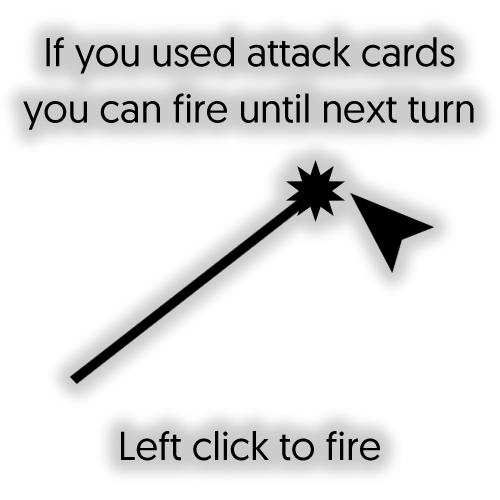
<style>
.page{position:relative;width:500px;height:500px;background:#ffffff}
.page>*{position:absolute;margin:0}
.t1{font:40.2px/56.3px "Geomanist-Regular";color:#000000}
</style>
<div class="page">
<p class="t1" style="left:23px;top:37px;width:451px;height:424px;text-align:center">If you used attack cards<br>you can fire until next turn<br><br><br><br><br><br>Left click to fire</p>
</div>
